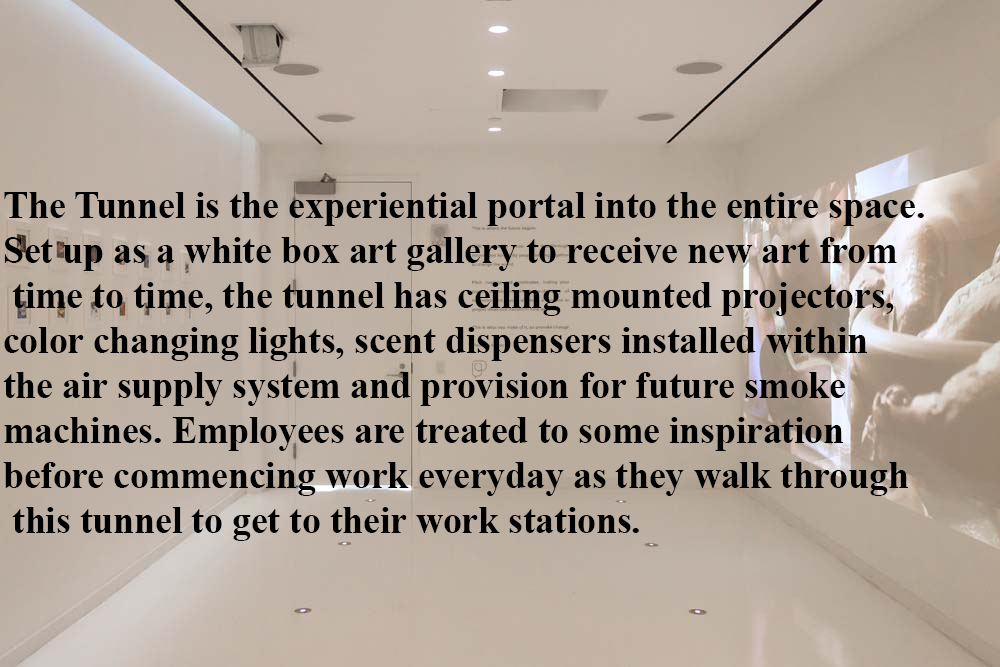
<style>
.page{position:relative;width:1000px;height:667px}
.page>*{position:absolute;margin:0}
.t1{font:37.5px "TimesNewRomanPS-BoldMT";color:#000000}
</style>
<div class="page">
<p class="t1" style="left:3px;top:192px;width:921px;height:349px">The Tunnel is the experiential portal into the entire space.<br>Set up as a white box art gallery to receive new art from<br> time to time, the tunnel has ceiling mounted projectors, <br>color changing lights, scent dispensers installed within <br>the air supply system and provision for future smoke <br>machines. Employees are treated to some inspiration <br>before commencing work everyday as they walk through<br> this tunnel to get to their work stations.</p>
</div>
